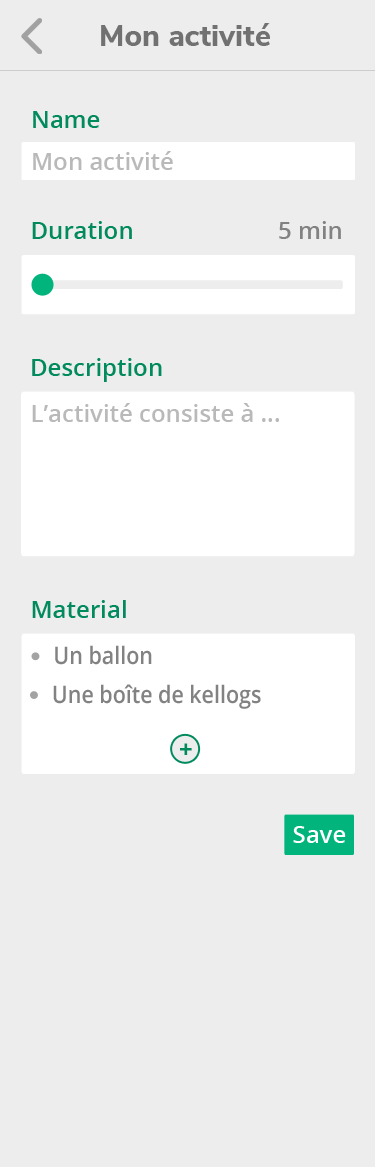
<style>
.page{position:relative;width:375px;height:1167px;background:#ededed}
.page>*{position:absolute;margin:0}
.t1{font:30px "NunitoSans-ExtraBold";color:#717171}
.t2{font:24px "OpenSans-SemiBold";color:#018a5e}
.t3{font:24px "OpenSans-SemiBold";color:#b9b9b9}
.t4{font:24px "OpenSans-SemiBold";color:#828282}
.t5{font:24px "OpenSans-SemiBold";color:#828282;scale:0.89 1}
.t6{font:24px "OpenSans-Bold";color:#018a5e}
.t7{font:24px "OpenSans-SemiBold";color:#ffffff}
</style>
<div class="page">
<p class="t1" style="left:101px;top:23px;width:169px;height:23px">Mon activité</p>
<p class="t2" style="left:33px;top:111px;width:67px;height:17px">Name</p>
<p class="t3" style="left:33px;top:151px;width:140px;height:19px">Mon activité</p>
<p class="t2" style="left:32px;top:221px;width:100px;height:18px">Duration</p>
<p class="t4" style="left:279px;top:221px;width:62px;height:18px">5 min</p>
<p class="t2" style="left:32px;top:358px;width:130px;height:24px">Description</p>
<p class="t3" style="left:32px;top:403px;width:247px;height:19px">L’activité consiste à ...</p>
<p class="t2" style="left:32px;top:600px;width:94px;height:18px">Material</p>
<p class="t5" style="left:55px;top:645px;width:97px;height:20px">Un ballon</p>
<p class="t5" style="left:53px;top:684px;width:208px;height:25px">Une boîte de kellogs</p>
<p class="t6" style="left:180px;top:743px;width:12px;height:12px">+</p>
<p class="t7" style="left:293px;top:826px;width:53px;height:17px">Save</p>
</div>
